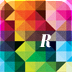
<style>
.page{position:relative;width:72px;height:72px}
.page>*{position:absolute;margin:0}
.t1{font:18px "BodoniBE-BoldCnItalic";color:#ffffff}
</style>
<div class="page">
<p class="t1" style="left:39px;top:34px;width:12px;height:14px">R</p>
</div>
